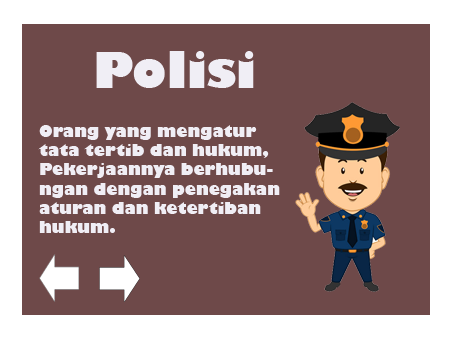
<style>
.page{position:relative;width:454px;height:340px;background:#6e4949}
.page>*{position:absolute;margin:0}
.t1{font:48px "GillSans-UltraBold";color:#f0eef5}
.t2{font:16px "GillSans-UltraBold";color:#f0eef5}
</style>
<div class="page">
<p class="t1" style="left:96px;top:51px;width:158px;height:37px">Polisi</p>
<p class="t2" style="left:38px;top:125px;width:242px;height:108px">Orang yang mengatur<br>tata tertib dan hukum,<br>Pekerjaannya berhubu-<br>ngan dengan penegakan<br>aturan dan ketertiban<br>hukum.</p>
</div>
